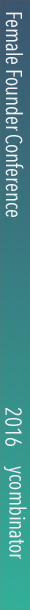
<style>
.page{position:relative;width:30px;height:610px}
.page>*{position:absolute;margin:0}
.t1{font:22.4px "AvenirNextCondensed-Regular";color:#eff3f6;scale:0.94 1}
</style>
<div class="page">
<p class="t1" style="left:5px;top:12px;width:19px;height:205px;rotate:90deg">Female Founder Conference</p>
<p class="t1" style="left:5px;top:408px;width:17px;height:38px;rotate:90deg">2016</p>
<p class="t1" style="left:4px;top:466px;width:23px;height:93px;rotate:90deg">ycombinator</p>
</div>
